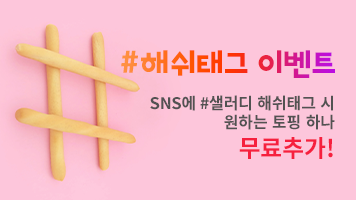
<style>
.page{position:relative;width:356px;height:200px;background:#fdc6db}
.page>*{position:absolute;margin:0}
.t1{font:30px "BRB";letter-spacing:-0.005em}
.t2{font:16px "NotoSansKR-Bold";letter-spacing:-0.005em;color:#525252}
.t3{font:24px "NotoSansKR-Bold";letter-spacing:-0.005em;color:#f6203e}
</style>
<div class="page">
<p class="t1" style="left:121px;top:50px;width:214px;height:28px">#해쉬태그 이벤트</p>
<p class="t2" style="left:150px;top:95px;width:185px;height:64px;text-align:right">SNS에 #샐러디 해쉬태그 시<br>원하는 토핑 하나<br><span class="t3">무료추가!</span></p>
</div>
